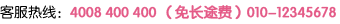
<style>
.page{position:relative;width:340px;height:24px;background:#ffffff}
.page>*{position:absolute;margin:0}
.t1{font:14px "FZY3JW--GB1-0";color:#e45987;font-weight:bold}
</style>
<div class="page">
<p class="t1" style="left:70px;top:5px;width:266px;height:15px">4008 400 400 （免长途费）010-12345678</p>
</div>
